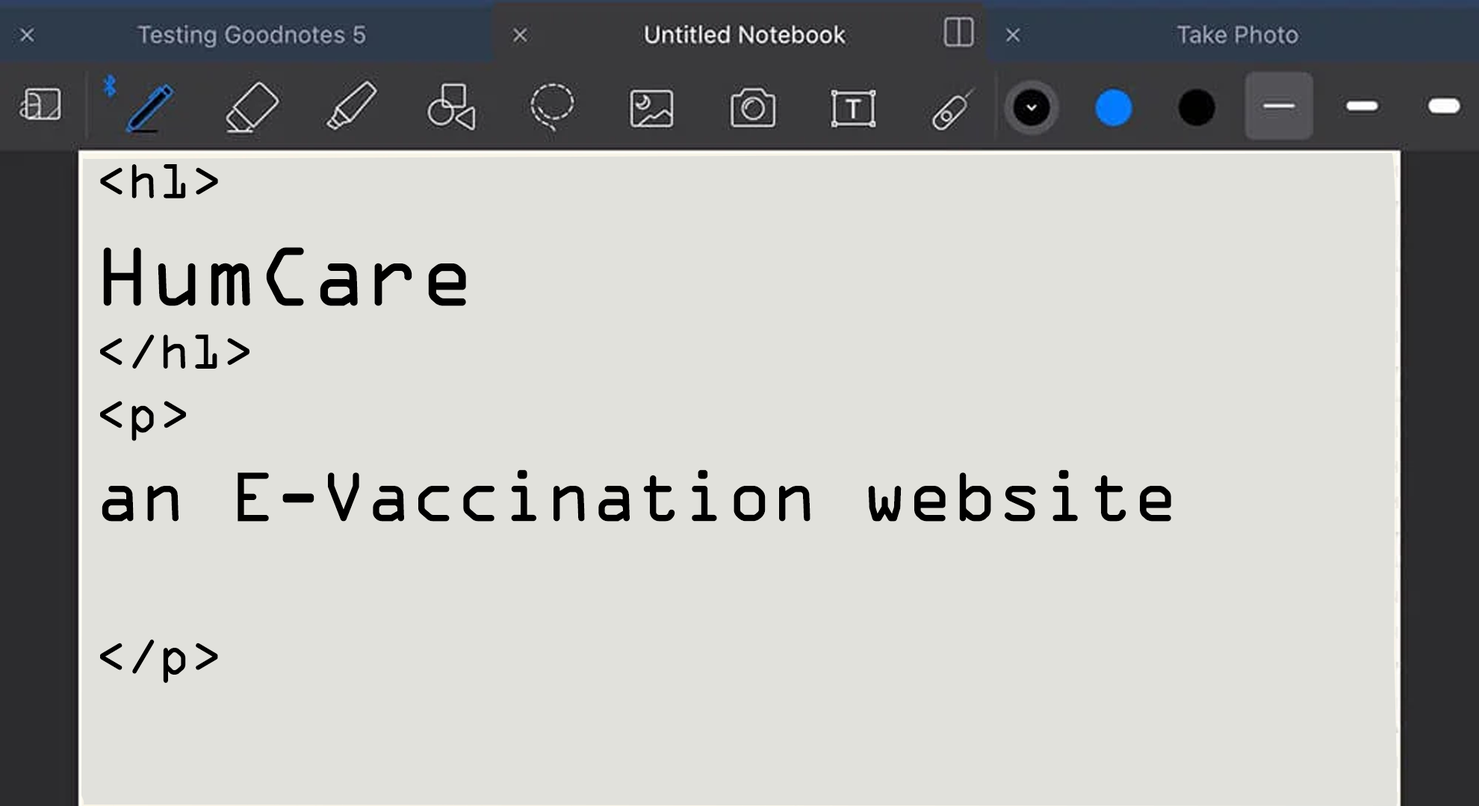
<style>
.page{position:relative;width:1479px;height:806px;background:#e1e1dc}
.page>*{position:absolute;margin:0}
.t1{font:74.7px "OCRAExtended";color:#000000}
.t2{font:52.5px "OCRAExtended";color:#000000}
.t3{font:89.6px "OCRAExtended";color:#000000}
</style>
<div class="page">
<p class="t1" style="left:100px;top:164px;width:1071px;height:520px"><span class="t2">&lt;h1&gt;<br></span><span class="t3">HumCare<br></span><span class="t2">&lt;/h1&gt;<br>&lt;p&gt;<br></span>an E-Vaccination website<br><br><span class="t2">&lt;/p&gt;</span></p>
</div>
